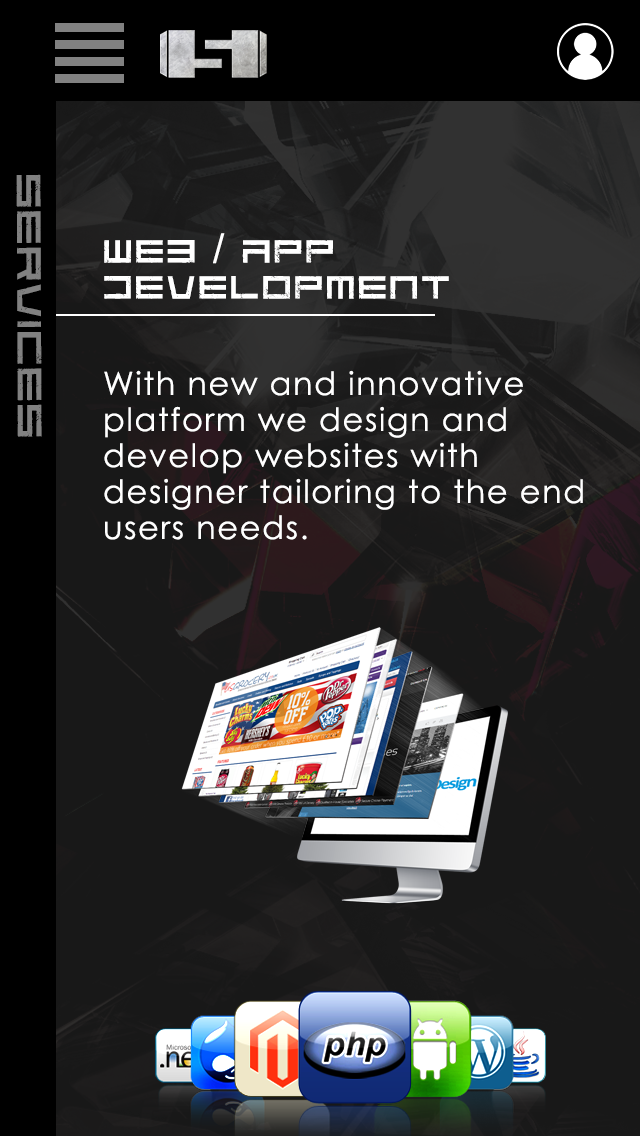
<style>
.page{position:relative;width:640px;height:1136px;background:#181818}
.page>*{position:absolute;margin:0}
.t1{font:42px "CodePredators-Regular";letter-spacing:0.075em;color:#818181;scale:1.13 1}
.t2{font:40px/36px "CodePredators-Regular";letter-spacing:0.1em;color:#ffffff}
.t3{font:40px/36px "ArialMT";letter-spacing:0.1em;color:#ffffff}
.t4{font:32px/36px "CenturyGothic";letter-spacing:0.05em;color:#ffffff}
</style>
<div class="page">
<p class="t1" style="left:16px;top:174px;width:26px;height:263px;rotate:90deg">services</p>
<p class="t2" style="left:104px;top:233px;width:345px;height:66px;text-align:right">Web <span class="t3">/</span> app <br>development</p>
<p class="t4" style="left:104px;top:370px;width:479px;height:170px;text-align:right">With new and innovative <br>platform we design and <br>develop websites with <br>designer tailoring to the end <br>users needs.</p>
</div>
